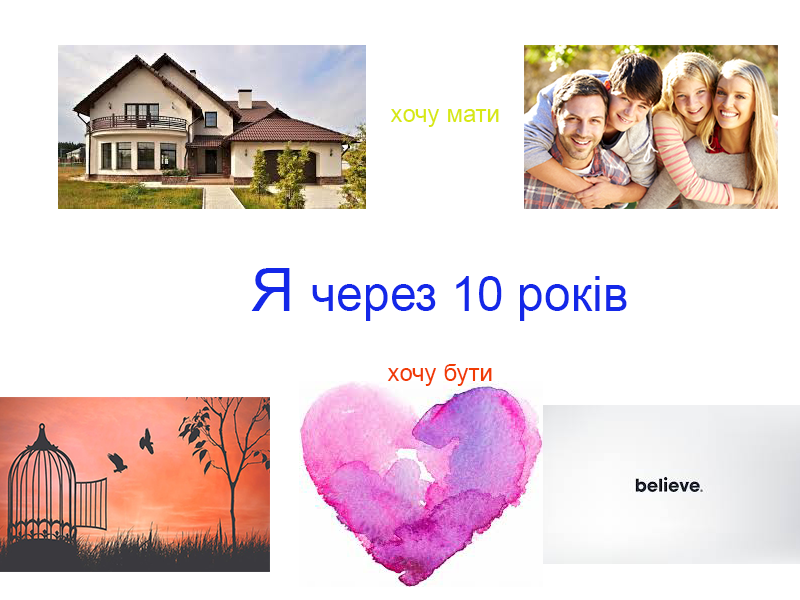
<style>
.page{position:relative;width:800px;height:600px;background:#ffffff}
.page>*{position:absolute;margin:0}
.t1{font:24px "ArialMT";color:#d7e814}
.t2{font:48px "ArialMT";color:#1428e8}
.t3{font:60px "ArialMT";color:#1428e8}
.t4{font:24px "ArialMT";color:#f03b04}
</style>
<div class="page">
<p class="t1" style="left:390px;top:109px;width:109px;height:18px">хочу мати</p>
<p class="t2" style="left:251px;top:268px;width:376px;height:53px"><span class="t3">Я </span>через 10 років</p>
<p class="t4" style="left:387px;top:364px;width:105px;height:22px">хочу бути</p>
</div>
